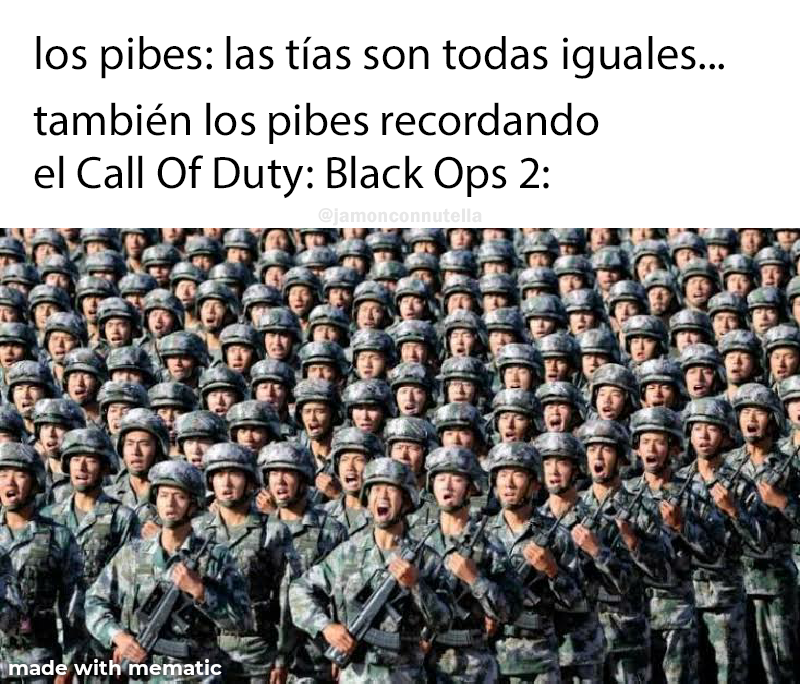
<style>
.page{position:relative;width:800px;height:684px;background:#ffffff}
.page>*{position:absolute;margin:0}
.t1{font:46.6px "MyriadPro-Regular";color:#000000}
.t2{font:45.6px "MyriadPro-Regular";color:#000000}
.t3{font:20.3px "FranklinGothic-Demi";color:#e7e7e7}
</style>
<div class="page">
<p class="t1" style="left:36px;top:36px;width:688px;height:43px">los pibes: las tías son todas iguales...</p>
<p class="t2" style="left:33px;top:102px;width:566px;height:97px">también los pibes recordando<br>el Call Of Duty: Black Ops 2:</p>
<p class="t3" style="left:318px;top:208px;width:164px;height:18px">@jamonconnutella</p>
</div>
